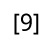
<style>
.page{position:relative;width:53px;height:41px;background:#ffffff}
.page>*{position:absolute;margin:0}
.t1{font:23.7px "DroidSans";color:#000000}
</style>
<div class="page">
<p class="t1" style="left:14px;top:13px;width:25px;height:22px">[9]</p>
</div>
